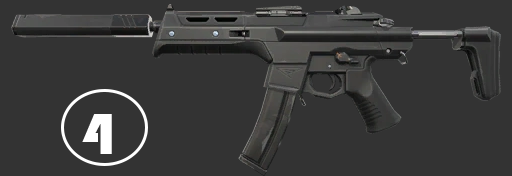
<style>
.page{position:relative;width:512px;height:176px;background:#333333}
.page>*{position:absolute;margin:0}
.t1{font:60px "Bauhaus93";color:#ffffff}
</style>
<div class="page">
<p class="t1" style="left:82px;top:114px;width:30px;height:40px">4</p>
</div>
